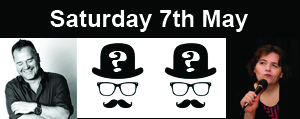
<style>
.page{position:relative;width:300px;height:119px;background:#060808}
.page>*{position:absolute;margin:0}
.t1{font:24px "Arial-BoldMT";color:#ffffff}
</style>
<div class="page">
<p class="t1" style="left:50px;top:10px;width:198px;height:22px">Saturday 7th May</p>
</div>
